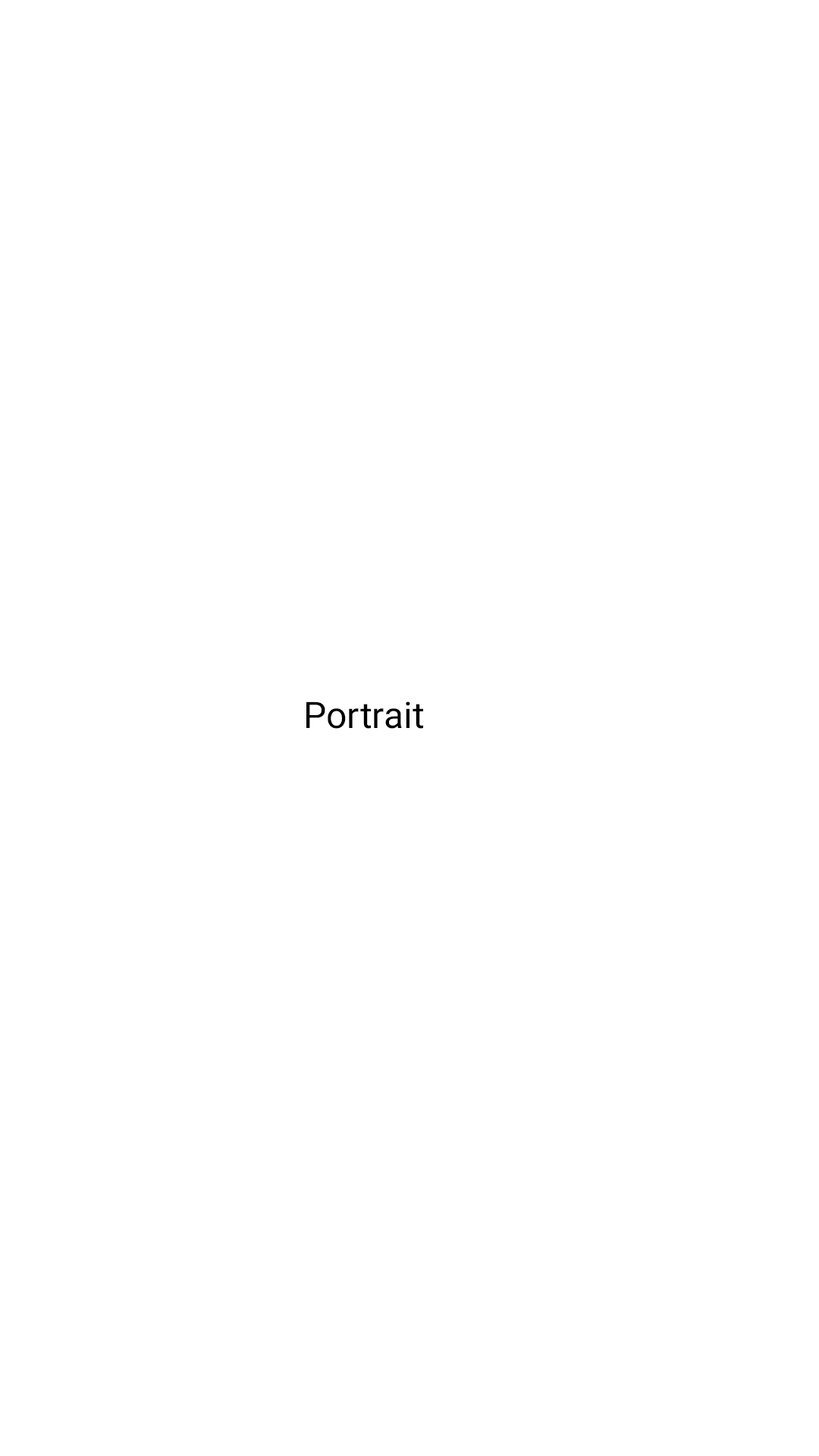
<style>
.page{position:relative;width:819px;height:1456px;background:#ffffff}
.page>*{position:absolute;margin:0}
.t1{font:36.4px "Roboto-Regular";color:#000000}
</style>
<div class="page">
<p class="t1" style="left:306px;top:701px;width:117px;height:28px">Portrait</p>
</div>
